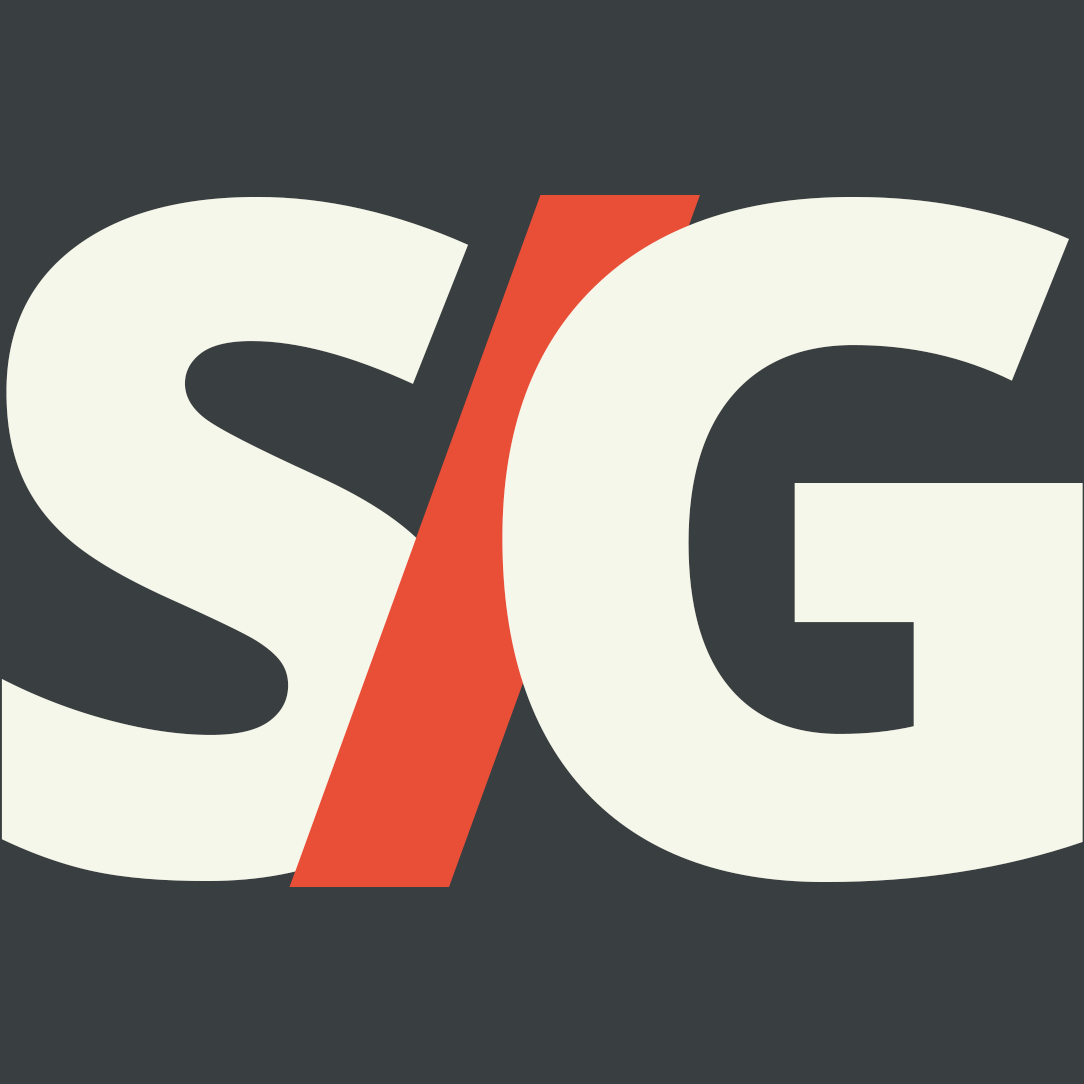
<style>
.page{position:relative;width:1084px;height:1084px;background:#393e41}
.page>*{position:absolute;margin:0}
.t1{font:932.1px "OpenSans-Extrabold";color:#f6f7eb}
.t2{font:943.4px "OpenSans-Extrabold";color:#e94f37}
.t3{font:933.9px "OpenSans-Extrabold";color:#f6f7eb}
</style>
<div class="page">
<p class="t1" style="left:1px;top:197px;width:467px;height:684px">S</p>
<p class="t2" style="left:289px;top:195px;width:411px;height:692px">/</p>
<p class="t3" style="left:502px;top:197px;width:581px;height:685px">G</p>
</div>
